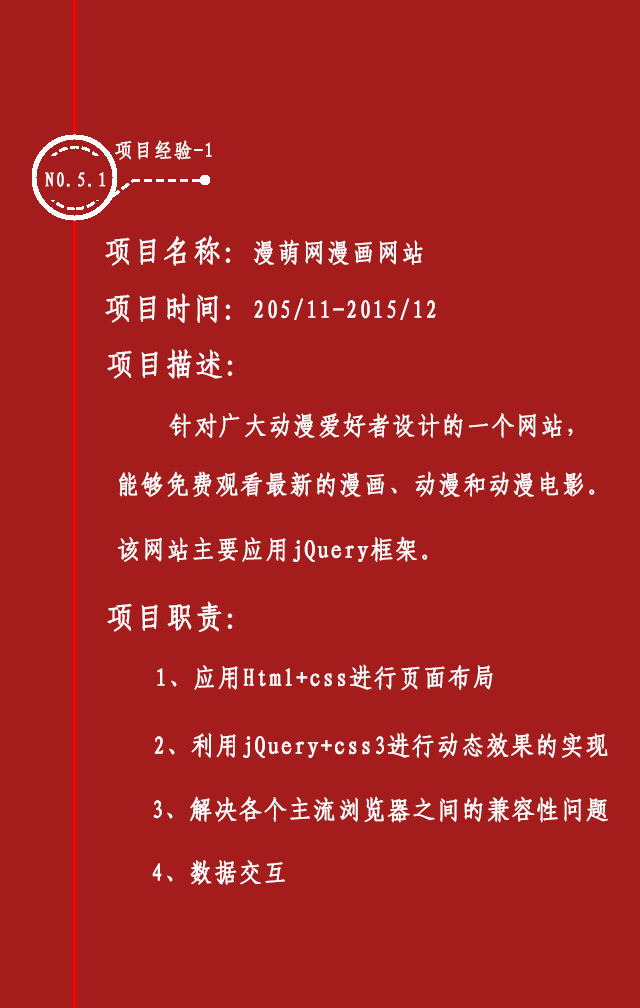
<style>
.page{position:relative;width:640px;height:1008px;background:#a41c1c}
.page>*{position:absolute;margin:0}
.t1{font:20px "-G-s-u-n-0-0-m";letter-spacing:0.05em;color:#fefcfc;font-weight:bold;scale:0.92 1}
.t2{font:25px "-G-s-u-n-0-0-m";letter-spacing:0.05em;color:#fefcfc;font-weight:bold;scale:0.92 1}
.t3{font:30px "-G-s-u-n-0-0-m";letter-spacing:0.05em;color:#fefcfc;font-weight:bold;scale:0.92 1}
</style>
<div class="page">
<p class="t1" style="left:115px;top:140px;width:97px;height:20px">项目经验-1</p>
<p class="t1" style="left:45px;top:172px;width:61px;height:15px">N0.5.1</p>
<p class="t2" style="left:105px;top:235px;width:318px;height:31px"><span class="t3">项目名称：</span>漫萌网漫画网站</p>
<p class="t2" style="left:105px;top:293px;width:331px;height:30px"><span class="t3">项目时间：</span>205/11-2015/12</p>
<p class="t3" style="left:107px;top:349px;width:126px;height:30px">项目描述：</p>
<p class="t2" style="left:169px;top:412px;width:404px;height:27px">针对广大动漫爱好者设计的一个网站，</p>
<p class="t2" style="left:119px;top:471px;width:476px;height:26px">能够免费观看最新的漫画、动漫和动漫电影。</p>
<p class="t2" style="left:117px;top:536px;width:311px;height:26px">该网站主要应用jQuery框架。</p>
<p class="t3" style="left:107px;top:601px;width:126px;height:31px">项目职责：</p>
<p class="t2" style="left:157px;top:664px;width:336px;height:27px">1、应用Html+css进行页面布局</p>
<p class="t2" style="left:154px;top:732px;width:454px;height:26px">2、利用jQuery+css3进行动态效果的实现</p>
<p class="t2" style="left:153px;top:796px;width:455px;height:27px">3、解决各个主流浏览器之间的兼容性问题</p>
<p class="t2" style="left:152px;top:860px;width:133px;height:25px">4、数据交互</p>
</div>
